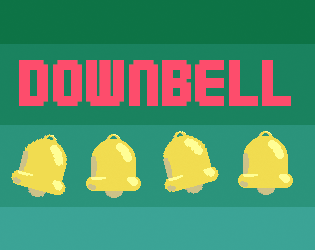
<style>
.page{position:relative;width:315px;height:250px}
.page>*{position:absolute;margin:0}
.t1{font:72px "Smart";color:#fd4d6c;font-weight:bold}
</style>
<div class="page">
<p class="t1" style="left:19px;top:60px;width:272px;height:46px">DOWNBELL</p>
</div>
